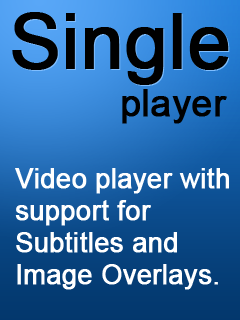
<style>
.page{position:relative;width:240px;height:320px}
.page>*{position:absolute;margin:0}
.t1{font:75.6px "ArialMT";color:#000000;font-weight:bold}
.t2{font:36.8px "ArialMT";color:#000000;font-weight:bold}
.t3{font:26.7px "ArialMT";color:#ffffff;font-weight:bold}
</style>
<div class="page">
<p class="t1" style="left:12px;top:12px;width:217px;height:73px">Single</p>
<p class="t2" style="left:122px;top:89px;width:105px;height:35px">player</p>
<p class="t3" style="left:15px;top:168px;width:214px;height:122px">Video player with<br>support for<br>Subtitles and <br>Image Overlays.</p>
</div>
